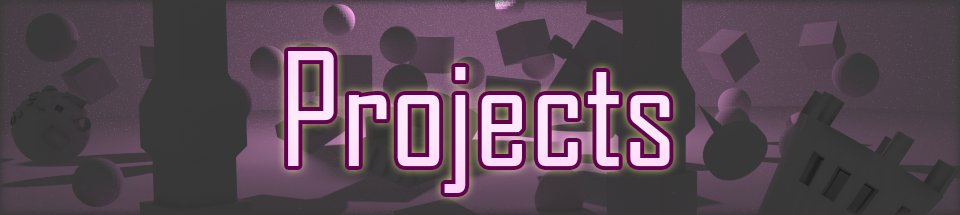
<style>
.page{position:relative;width:960px;height:215px}
.page>*{position:absolute;margin:0}
.t1{font:150px "AgencyFB-Reg";color:#ffe7fb}
</style>
<div class="page">
<p class="t1" style="left:288px;top:51px;width:382px;height:142px">Projects</p>
</div>
